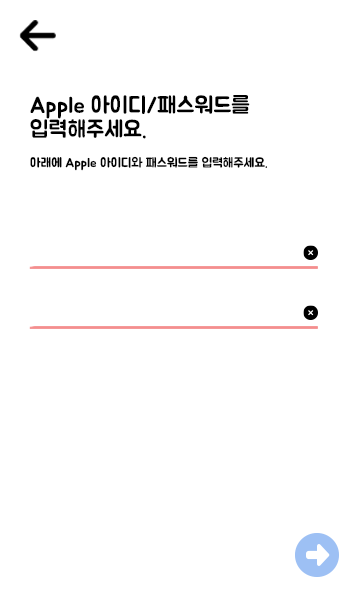
<style>
.page{position:relative;width:360px;height:600px;background:#ffffff}
.page>*{position:absolute;margin:0}
.t1{font:23px/24px "BMJUA";color:#000000}
.t2{font:13px "BMJUA";color:#000000}
</style>
<div class="page">
<p class="t1" style="left:30px;top:95px;width:220px;height:44px">Apple 아이디/패스워드를<br>입력해주세요.</p>
<p class="t2" style="left:30px;top:156px;width:237px;height:15px">아래에 Apple 아이디와 패스워드를 입력해주세요.</p>
</div>
